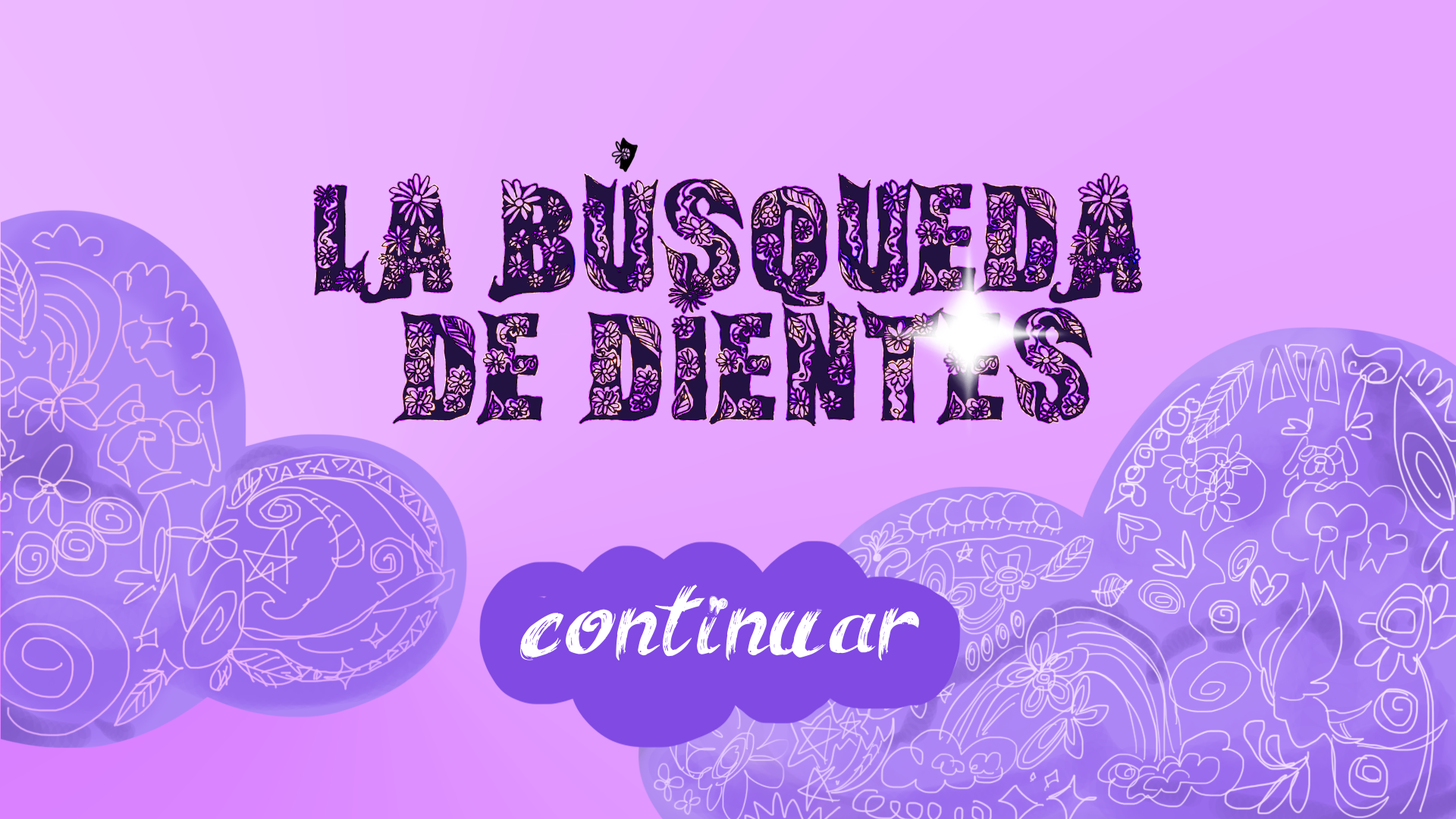
<style>
.page{position:relative;width:1456px;height:819px}
.page>*{position:absolute;margin:0}
.t1{font:142.7px/129.5px "FairyTale-Regular";letter-spacing:-0.01em;color:#221241;scale:1.11 1}
</style>
<div class="page">
<p class="t1" style="left:313px;top:173px;width:830px;height:253px;text-align:center">La Busqueda <br>de Dientes</p>
</div>
